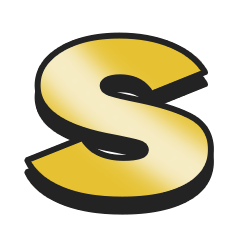
<style>
.page{position:relative;width:250px;height:250px;background:#ffffff}
.page>*{position:absolute;margin:0}
.t1{font:224px "Gilroy-Heavy";letter-spacing:0.3em;scale:1.45 1}
</style>
<div class="page">
<p class="t1" style="left:27px;top:35px;width:184px;height:165px">S</p>
</div>
